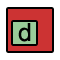
<style>
.page{position:relative;width:60px;height:60px;background:#ffffff}
.page>*{position:absolute;margin:0}
.t1{font:25px "ArialMT";color:#000000}
</style>
<div class="page">
<p class="t1" style="left:18px;top:23px;width:13px;height:19px">d</p>
</div>
